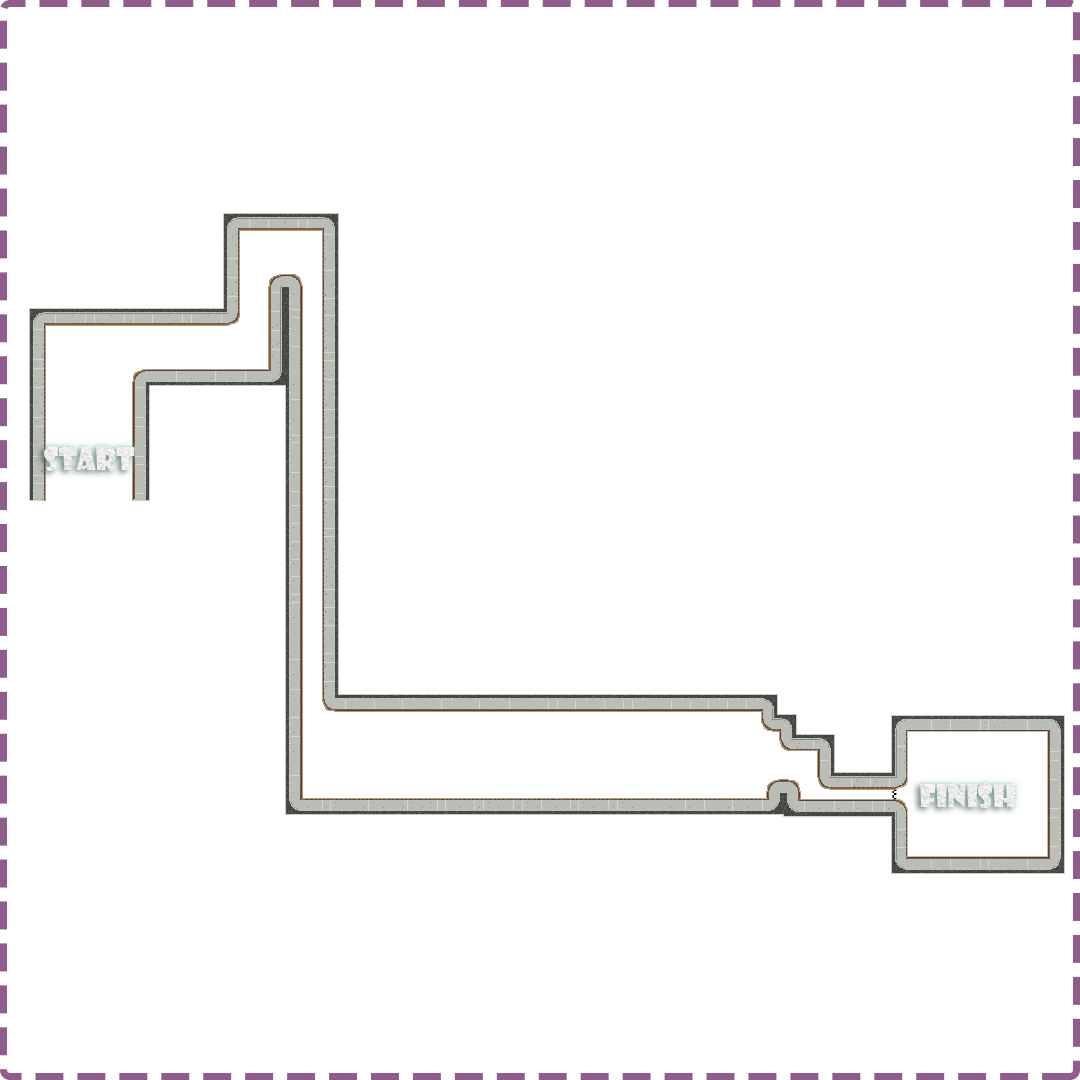
<style>
.page{position:relative;width:1080px;height:1080px;background:#ffffff}
.page>*{position:absolute;margin:0}
.t1{font:30px "ShowcardGothic-Reg";color:#ececec}
</style>
<div class="page">
<p class="t1" style="left:44px;top:446px;width:91px;height:25px">start</p>
<p class="t1" style="left:920px;top:783px;width:96px;height:25px">finish</p>
</div>
